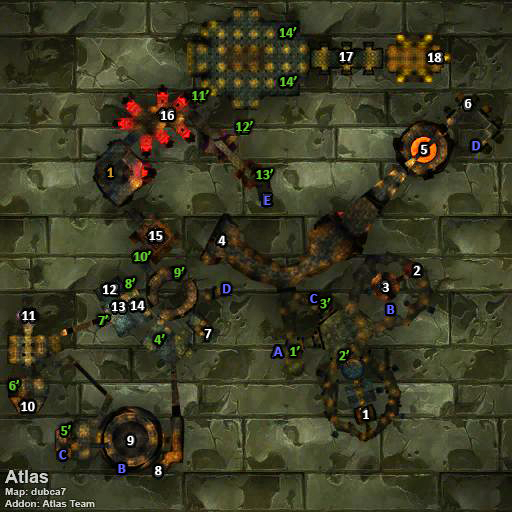
<style>
.page{position:relative;width:512px;height:512px}
.page>*{position:absolute;margin:0}
.t1{font:14px "Calibri-Bold";color:#66cc33}
.t2{font:14px "Calibri-Bold";color:#ffffff}
.t3{font:14px "Calibri-Bold";color:#6666ff}
.t4{font:14px "Calibri-Bold";color:#cc9933}
</style>
<div class="page">
<p class="t1" style="left:279px;top:27px;width:18px;height:10px">14’</p>
<p class="t2" style="left:339px;top:52px;width:14px;height:9px">17</p>
<p class="t2" style="left:428px;top:53px;width:13px;height:9px">18</p>
<p class="t1" style="left:280px;top:76px;width:17px;height:10px">14’</p>
<p class="t1" style="left:192px;top:90px;width:17px;height:10px">11’</p>
<p class="t2" style="left:465px;top:99px;width:7px;height:9px">6</p>
<p class="t2" style="left:161px;top:111px;width:13px;height:9px">16</p>
<p class="t1" style="left:236px;top:121px;width:17px;height:10px">12’</p>
<p class="t2" style="left:421px;top:145px;width:6px;height:9px">5</p>
<p class="t3" style="left:472px;top:141px;width:9px;height:9px">D</p>
<p class="t4" style="left:107px;top:168px;width:7px;height:9px">1</p>
<p class="t1" style="left:256px;top:169px;width:17px;height:10px">13’</p>
<p class="t3" style="left:264px;top:196px;width:6px;height:9px">E</p>
<p class="t2" style="left:149px;top:231px;width:14px;height:9px">15</p>
<p class="t2" style="left:218px;top:236px;width:8px;height:9px">4</p>
<p class="t1" style="left:134px;top:251px;width:17px;height:10px">10’</p>
<p class="t1" style="left:174px;top:267px;width:11px;height:10px">9’</p>
<p class="t2" style="left:414px;top:266px;width:7px;height:9px">2</p>
<p class="t1" style="left:125px;top:278px;width:10px;height:10px">8’</p>
<p class="t2" style="left:103px;top:285px;width:14px;height:9px">12</p>
<p class="t3" style="left:223px;top:284px;width:8px;height:9px">D</p>
<p class="t3" style="left:310px;top:294px;width:7px;height:9px">C</p>
<p class="t2" style="left:383px;top:283px;width:6px;height:9px">3</p>
<p class="t2" style="left:112px;top:302px;width:13px;height:9px">13</p>
<p class="t2" style="left:131px;top:301px;width:14px;height:9px">14</p>
<p class="t1" style="left:320px;top:298px;width:11px;height:10px">3’</p>
<p class="t3" style="left:387px;top:305px;width:8px;height:9px">B</p>
<p class="t2" style="left:22px;top:311px;width:14px;height:9px">11</p>
<p class="t1" style="left:98px;top:315px;width:10px;height:10px">7’</p>
<p class="t2" style="left:204px;top:329px;width:8px;height:9px">7</p>
<p class="t1" style="left:154px;top:334px;width:11px;height:10px">4’</p>
<p class="t3" style="left:274px;top:347px;width:9px;height:9px">A</p>
<p class="t1" style="left:290px;top:346px;width:10px;height:10px">1’</p>
<p class="t1" style="left:339px;top:350px;width:10px;height:10px">2’</p>
<p class="t1" style="left:9px;top:380px;width:10px;height:10px">6’</p>
<p class="t2" style="left:21px;top:402px;width:14px;height:9px">10</p>
<p class="t2" style="left:363px;top:410px;width:6px;height:9px">1</p>
<p class="t1" style="left:61px;top:425px;width:10px;height:10px">5’</p>
<p class="t2" style="left:127px;top:436px;width:7px;height:9px">9</p>
<p class="t3" style="left:59px;top:450px;width:8px;height:9px">C</p>
<p class="t3" style="left:118px;top:464px;width:8px;height:9px">B</p>
<p class="t2" style="left:155px;top:466px;width:7px;height:9px">8</p>
</div>
